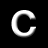
<style>
.page{position:relative;width:48px;height:48px;background:#000000}
.page>*{position:absolute;margin:0}
.t1{font:36.9px "HelveticaNeue-Bold";color:#ffffff}
</style>
<div class="page">
<p class="t1" style="left:11px;top:10px;width:25px;height:28px">C</p>
</div>
